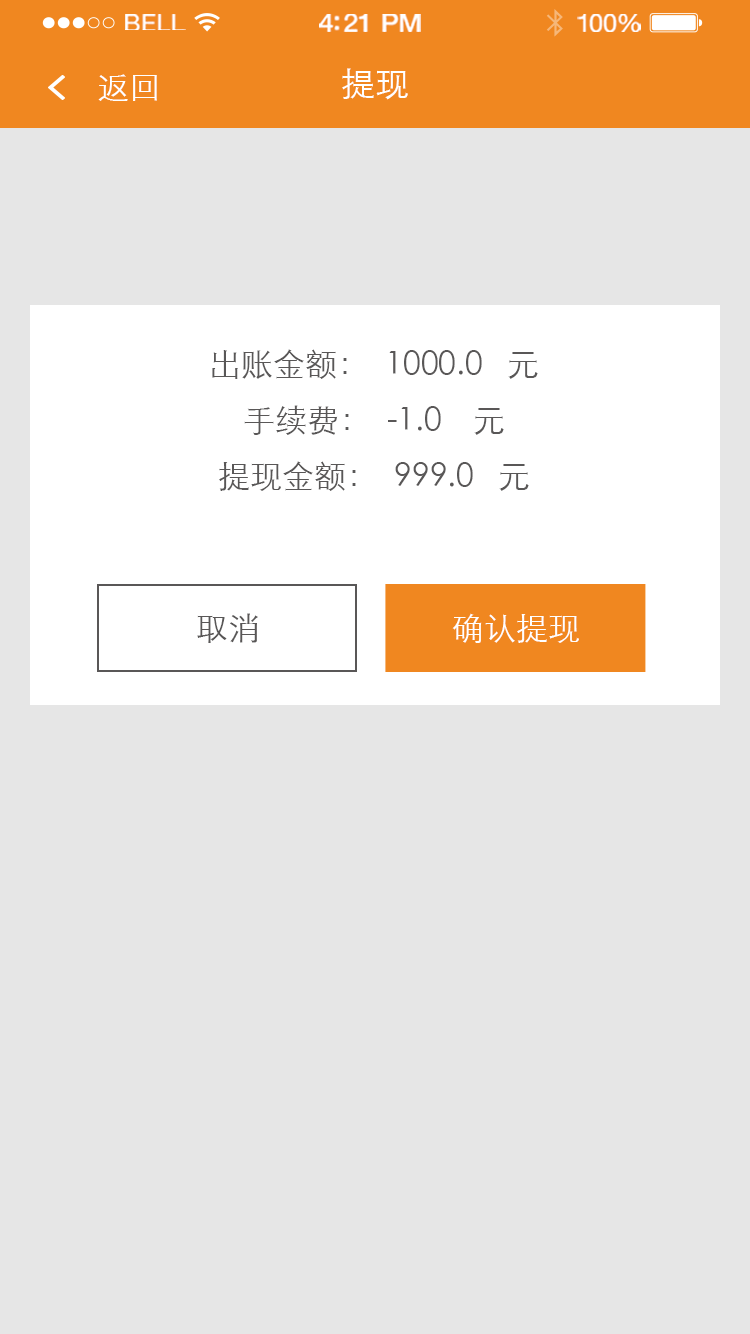
<style>
.page{position:relative;width:750px;height:1334px;background:#e6e6e6}
.page>*{position:absolute;margin:0}
.t1{font:23.3px "HelveticaNeue";letter-spacing:0.02em;color:#ffffff;scale:1.06 1}
.t2{font:25.3px "HelveticaNeue-Medium";letter-spacing:-0.02em;color:#ffffff;scale:1.06 1}
.t3{font:24.3px "HelveticaNeue";letter-spacing:-0.02em;color:#ffffff;scale:1.06 1}
.t4{font:32px "STXihei";color:#ffffff}
.t5{font:34px "STXihei";color:#ffffff}
.t6{font:32px/56px "STXihei";color:#595757}
.t7{font:32px "STXihei";color:#595757}
</style>
<div class="page">
<p class="t1" style="left:125px;top:14px;width:61px;height:16px">BELL</p>
<p class="t2" style="left:319px;top:14px;width:102px;height:18px">4:21 PM</p>
<p class="t3" style="left:577px;top:14px;width:64px;height:18px">100%</p>
<p class="t4" style="left:98px;top:74px;width:59px;height:27px">返回</p>
<p class="t5" style="left:342px;top:68px;width:66px;height:32px">提现</p>
<p class="t6" style="left:212px;top:349px;width:326px;height:142px;text-align:center">出账金额：  1000.0   元<br>手续费：  -1.0    元<br>提现金额：  999.0   元</p>
<p class="t7" style="left:197px;top:613px;width:61px;height:30px">取消</p>
<p class="t4" style="left:452px;top:613px;width:127px;height:30px">确认提现</p>
</div>
